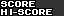
<style>
.page{position:relative;width:64px;height:16px;background:#000000}
.page>*{position:absolute;margin:0}
.t1{font:7px "MegaMan-2";color:#ffffff}
</style>
<div class="page">
<p class="t1" style="left:1px;top:1px;width:34px;height:6px">Score</p>
<p class="t1" style="left:1px;top:9px;width:51px;height:6px">HI-SCORE</p>
</div>
